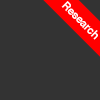
<style>
.page{position:relative;width:100px;height:100px;background:#333333}
.page>*{position:absolute;margin:0}
.t1{font:11px "Helvetica-Bold";letter-spacing:-0.02em;color:#ffffff}
</style>
<div class="page">
<p class="t1" style="left:61px;top:1px;width:37px;height:39px;rotate:45deg">Research</p>
</div>
